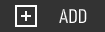
<style>
.page{position:relative;width:105px;height:32px;background:#333333}
.page>*{position:absolute;margin:0}
.t1{font:20px "D-DINCondensed";color:#ffffff}
</style>
<div class="page">
<p class="t1" style="left:59px;top:9px;width:28px;height:14px">ADD</p>
</div>
